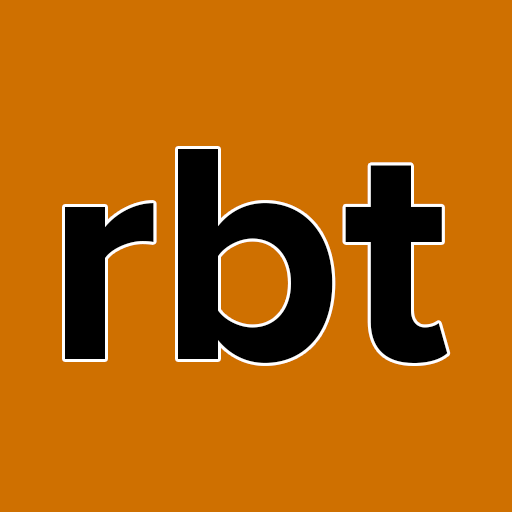
<style>
.page{position:relative;width:512px;height:512px;background:#cf7000}
.page>*{position:absolute;margin:0}
.t1{font:315px "ProximaNova-Bold";color:#000000}
</style>
<div class="page">
<p class="t1" style="left:65px;top:149px;width:383px;height:214px">rbt</p>
</div>
